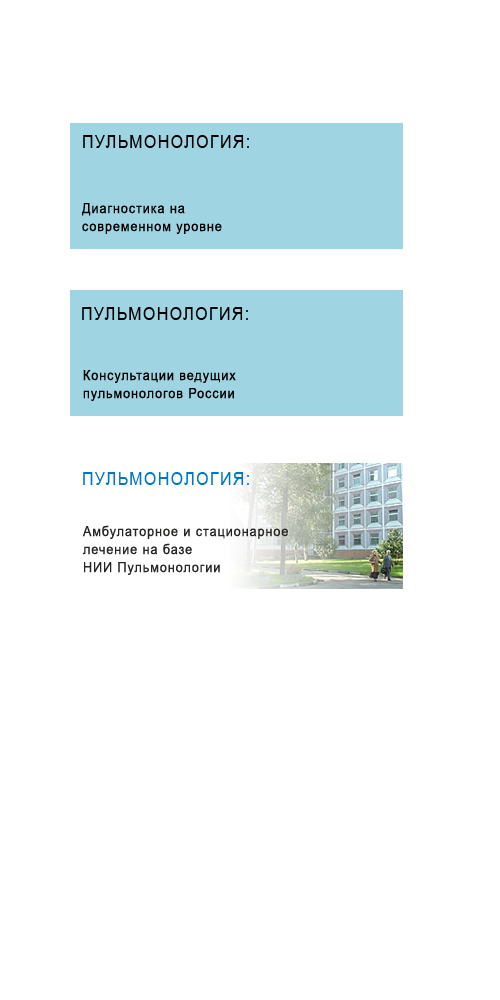
<style>
.page{position:relative;width:500px;height:1000px;background:#ffffff}
.page>*{position:absolute;margin:0}
.t1{font:18px "ArialMT";letter-spacing:0.075em;color:#000000;text-transform:uppercase;scale:0.9 1}
.t2{font:14px/18px "ArialMT";letter-spacing:0.075em;color:#000000;scale:0.9 1}
.t3{font:18px "ArialMT";letter-spacing:0.075em;color:#0078c1;text-transform:uppercase;scale:0.9 1}
.t4{font:14px/18px "ArialMT";letter-spacing:0.075em;color:#272524;scale:0.9 1}
</style>
<div class="page">
<p class="t1" style="left:83px;top:135px;width:166px;height:13px">Пульмонология:</p>
<p class="t2" style="left:82px;top:203px;width:140px;height:31px">Диагностика на современном уровне</p>
<p class="t1" style="left:82px;top:307px;width:166px;height:13px">Пульмонология:</p>
<p class="t2" style="left:83px;top:369px;width:153px;height:32px">Консультации ведущих пульмонологов России</p>
<p class="t3" style="left:83px;top:472px;width:166px;height:13px">Пульмонология:</p>
<p class="t4" style="left:82px;top:525px;width:206px;height:50px">Амбулаторное и стационарное лечение на базе                   НИИ Пульмонологии</p>
</div>
